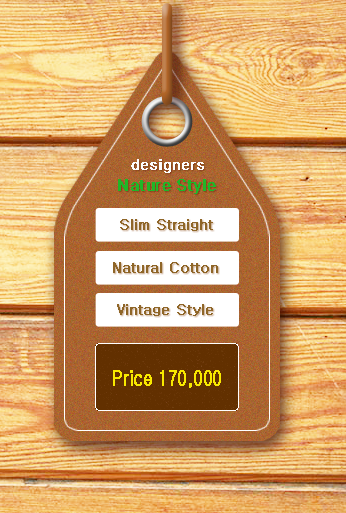
<style>
.page{position:relative;width:346px;height:513px}
.page>*{position:absolute;margin:0}
.t1{font:15px "Roboto-Regular";color:#fefefe;font-weight:bold}
.t2{font:15.9px "Roboto-Regular";color:#20b627;font-weight:bold}
.t3{font:15px "Gulim";color:#8f6628;font-weight:bold}
.t4{font:21.2px "Gulim";color:#f8e900;font-weight:bold;scale:0.75 1}
</style>
<div class="page">
<p class="t1" style="left:131px;top:159px;width:73px;height:14px">designers</p>
<p class="t2" style="left:118px;top:179px;width:98px;height:15px">Nature Style</p>
<p class="t3" style="left:120px;top:219px;width:93px;height:12px">Slim Straight</p>
<p class="t3" style="left:113px;top:262px;width:105px;height:11px">Natural Cotton</p>
<p class="t3" style="left:117px;top:304px;width:96px;height:12px">Vintage Style</p>
<p class="t4" style="left:113px;top:370px;width:108px;height:18px">Price 170,000</p>
</div>
